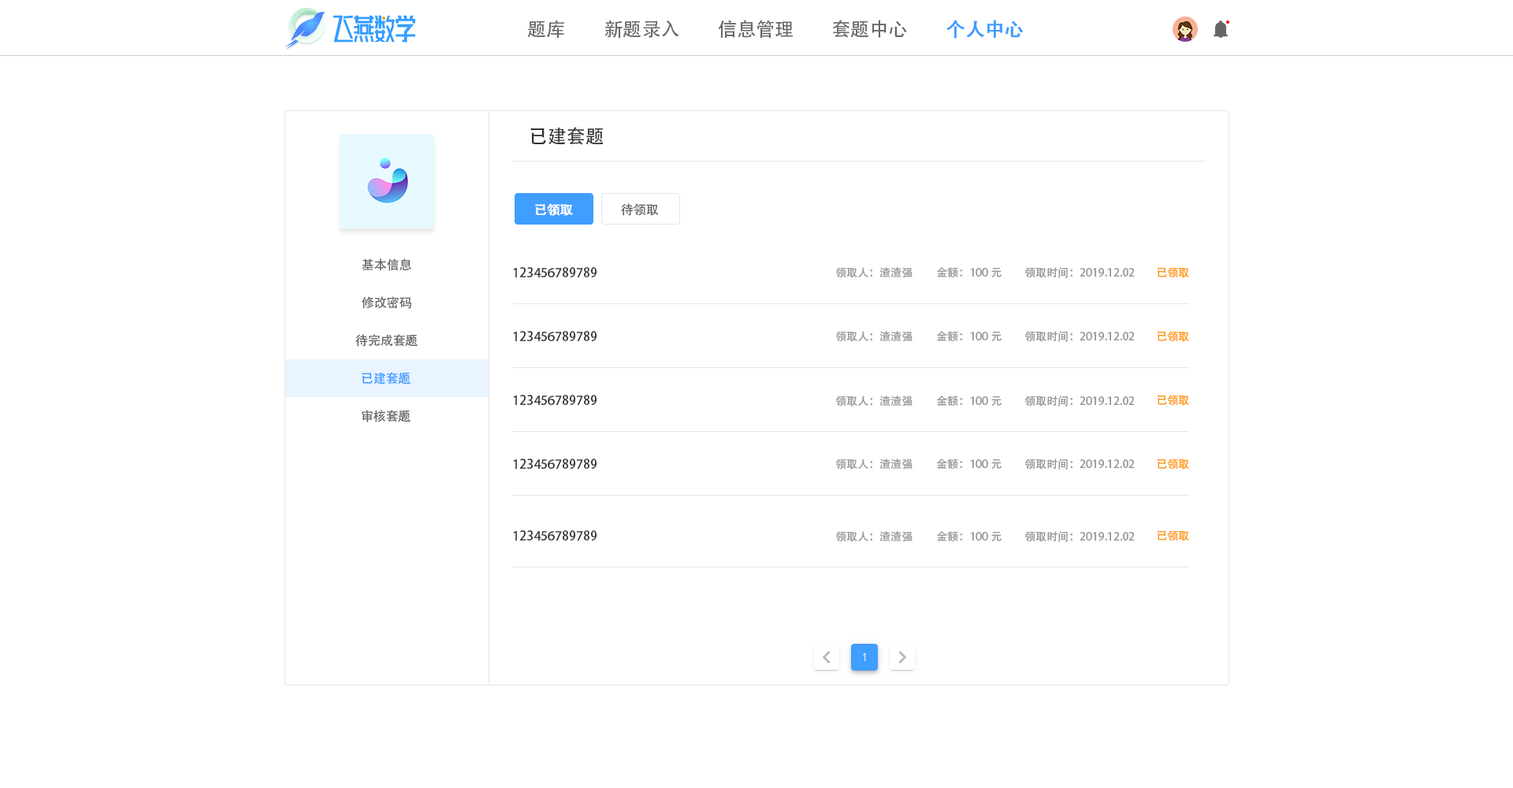
<style>
.page{position:relative;width:1513px;height:788px;background:#ffffff}
.page>*{position:absolute;margin:0}
.t1{font:18.9px "AdobeHeitiStd-Regular";color:#666666}
.t2{font:18.9px "AdobeHeitiStd-Regular";color:#409eff;font-weight:bold}
.t3{font:18.9px "AdobeHeitiStd-Regular";color:#333333}
.t4{font:12.6px "AdobeHeitiStd-Regular";color:#fefefe;font-weight:bold}
.t5{font:12.6px "AdobeHeitiStd-Regular";color:#666666}
.t6{font:12.6px "AdobeHeitiStd-Regular";color:#333333}
.t7{font:11px "AdobeHeitiStd-Regular";color:#999999}
.t8{font:11px "AdobeHeitiStd-Regular";color:#ff9814}
.t9{font:12.6px "AdobeHeitiStd-Regular";color:#409eff}
</style>
<div class="page">
<p class="t1" style="left:527px;top:20px;width:37px;height:18px">题库</p>
<p class="t1" style="left:604px;top:20px;width:75px;height:18px">新题录入</p>
<p class="t1" style="left:718px;top:20px;width:75px;height:19px">信息管理</p>
<p class="t1" style="left:833px;top:20px;width:74px;height:18px">套题中心</p>
<p class="t2" style="left:946px;top:20px;width:78px;height:19px">个人中心</p>
<p class="t3" style="left:530px;top:127px;width:74px;height:18px">已建套题</p>
<p class="t4" style="left:535px;top:203px;width:38px;height:13px">已领取</p>
<p class="t5" style="left:621px;top:203px;width:38px;height:13px">待领取</p>
<p class="t5" style="left:362px;top:258px;width:50px;height:13px">基本信息</p>
<p class="t6" style="left:513px;top:267px;width:84px;height:10px">123456789789</p>
<p class="t7" style="left:835px;top:267px;width:78px;height:11px">领取人：渣渣强</p>
<p class="t7" style="left:936px;top:267px;width:66px;height:10px">金额：100元</p>
<p class="t7" style="left:1024px;top:267px;width:111px;height:11px">领取时间：2019.12.02</p>
<p class="t8" style="left:1157px;top:267px;width:32px;height:11px">已领取</p>
<p class="t5" style="left:362px;top:296px;width:49px;height:13px">修改密码</p>
<p class="t5" style="left:355px;top:334px;width:63px;height:13px">待完成套题</p>
<p class="t6" style="left:513px;top:331px;width:84px;height:10px">123456789789</p>
<p class="t7" style="left:835px;top:331px;width:78px;height:11px">领取人：渣渣强</p>
<p class="t7" style="left:936px;top:331px;width:66px;height:10px">金额：100元</p>
<p class="t7" style="left:1024px;top:331px;width:111px;height:11px">领取时间：2019.12.02</p>
<p class="t8" style="left:1157px;top:331px;width:32px;height:11px">已领取</p>
<p class="t9" style="left:362px;top:372px;width:49px;height:13px">已建套题</p>
<p class="t6" style="left:513px;top:395px;width:84px;height:10px">123456789789</p>
<p class="t7" style="left:835px;top:396px;width:78px;height:11px">领取人：渣渣强</p>
<p class="t7" style="left:936px;top:396px;width:66px;height:10px">金额：100元</p>
<p class="t7" style="left:1024px;top:396px;width:111px;height:11px">领取时间：2019.12.02</p>
<p class="t8" style="left:1157px;top:395px;width:32px;height:11px">已领取</p>
<p class="t5" style="left:362px;top:410px;width:49px;height:12px">审核套题</p>
<p class="t6" style="left:513px;top:459px;width:84px;height:10px">123456789789</p>
<p class="t7" style="left:835px;top:459px;width:78px;height:11px">领取人：渣渣强</p>
<p class="t7" style="left:936px;top:459px;width:66px;height:10px">金额：100元</p>
<p class="t7" style="left:1024px;top:459px;width:111px;height:11px">领取时间：2019.12.02</p>
<p class="t8" style="left:1157px;top:459px;width:32px;height:11px">已领取</p>
<p class="t6" style="left:513px;top:530px;width:84px;height:11px">123456789789</p>
<p class="t7" style="left:835px;top:531px;width:78px;height:11px">领取人：渣渣强</p>
<p class="t7" style="left:936px;top:531px;width:66px;height:10px">金额：100元</p>
<p class="t7" style="left:1024px;top:531px;width:111px;height:11px">领取时间：2019.12.02</p>
<p class="t8" style="left:1157px;top:530px;width:32px;height:11px">已领取</p>
</div>
